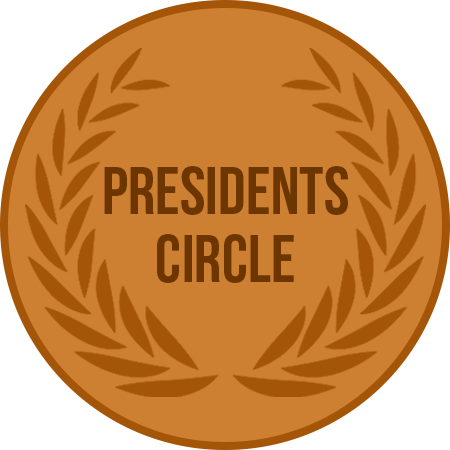
<style>
.page{position:relative;width:450px;height:450px;background:#cd7f32}
.page>*{position:absolute;margin:0}
.t1{font:67.7px/67.9px "BebasNeueBold";color:#6d3701}
</style>
<div class="page">
<p class="t1" style="left:104px;top:166px;width:244px;height:117px;text-align:center">presidents<br>circle</p>
</div>
